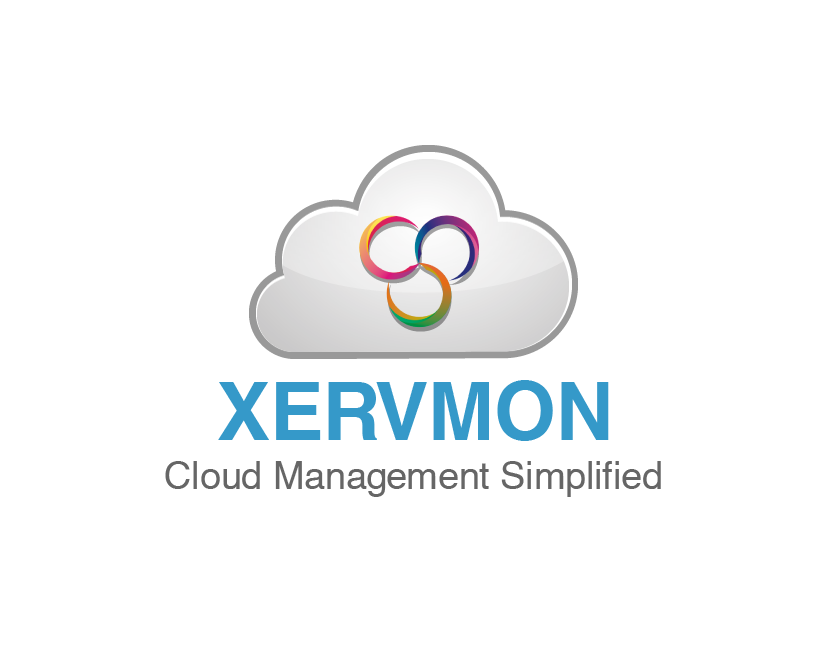
<style>
.page{position:relative;width:830px;height:670px;background:#ffffff}
.page>*{position:absolute;margin:0}
.t1{font:79.5px "HelveticaCE-Bold";color:#3599c9}
.t2{font:37.5px "HelveticaCE-Regular";color:#666666}
</style>
<div class="page">
<p class="t1" style="left:218px;top:380px;width:391px;height:61px">XERVMON</p>
<p class="t2" style="left:165px;top:461px;width:496px;height:36px">Cloud Management Simplified</p>
</div>
